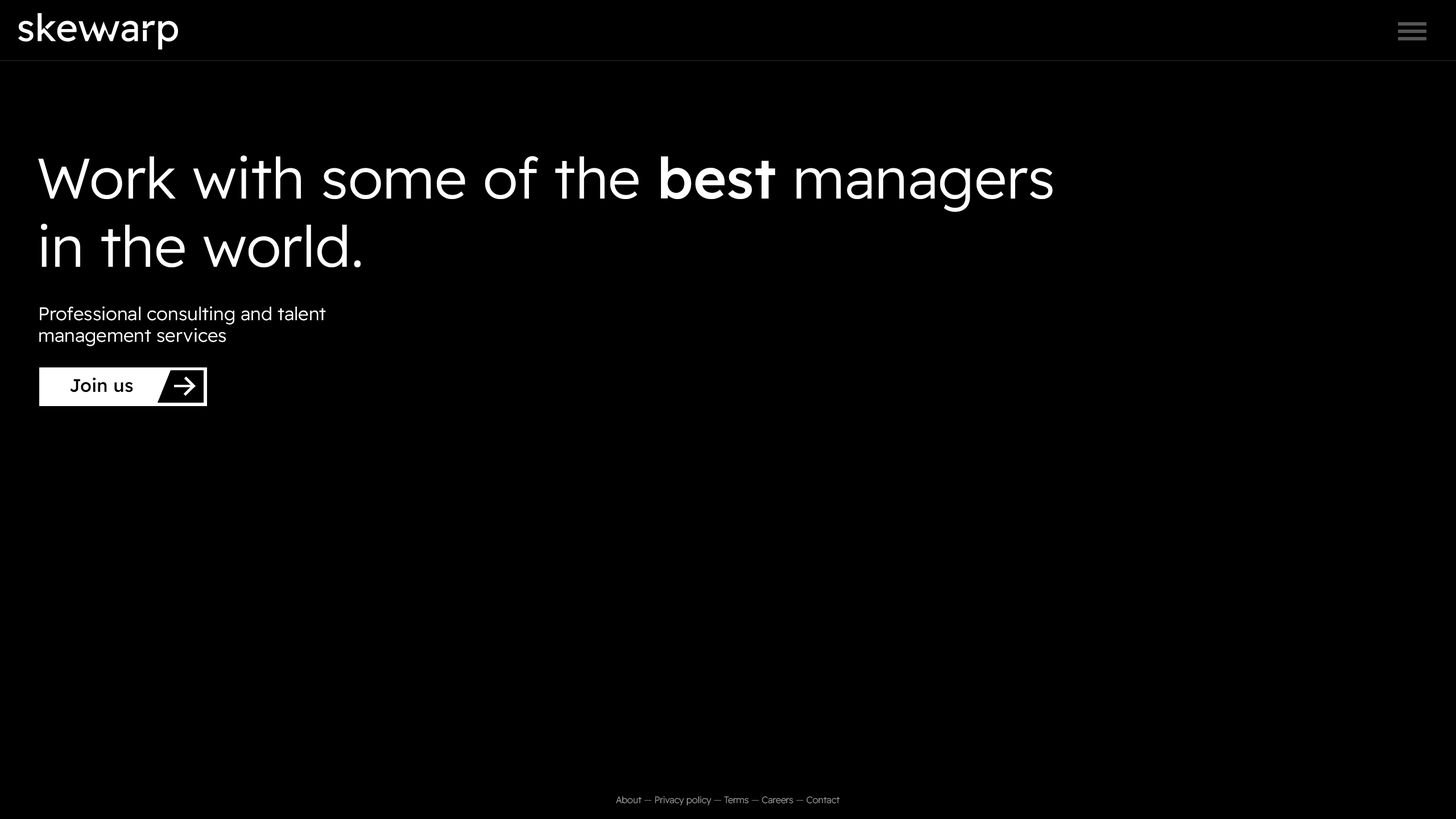
<style>
.page{position:relative;width:1456px;height:819px;background:#000000}
.page>*{position:absolute;margin:0}
.t1{font:56.9px "ReadexPro-Light";color:#ffffff}
.t2{font:56.9px "ReadexPro-Medium";color:#ffffff}
.t3{font:18.2px "ReadexPro-Light";color:#ffffff}
.t4{font:18.2px "ReadexPro-Medium";color:#000000}
.t5{font:9.1px "ReadexPro-ExtraLight";color:#9d9d9d}
.t6{font:9.1px "ReadexPro-ExtraLight";color:#717171}
.t7{font:9.1px "ReadexPro-ExtraLight";color:#727272}
</style>
<div class="page">
<p class="t1" style="left:38px;top:155px;width:1015px;height:112px">Work with some of the <span class="t2">best </span>managers<br>in the world.</p>
<p class="t3" style="left:39px;top:306px;width:287px;height:40px">Professional consulting and talent<br>management services</p>
<p class="t4" style="left:70px;top:378px;width:63px;height:14px">Join us</p>
<p class="t5" style="left:616px;top:796px;width:224px;height:9px">About <span class="t6">— </span>Privacy policy <span class="t7">— </span>Terms <span class="t7">— </span>Careers <span class="t7">— </span>Contact</p>
</div>
